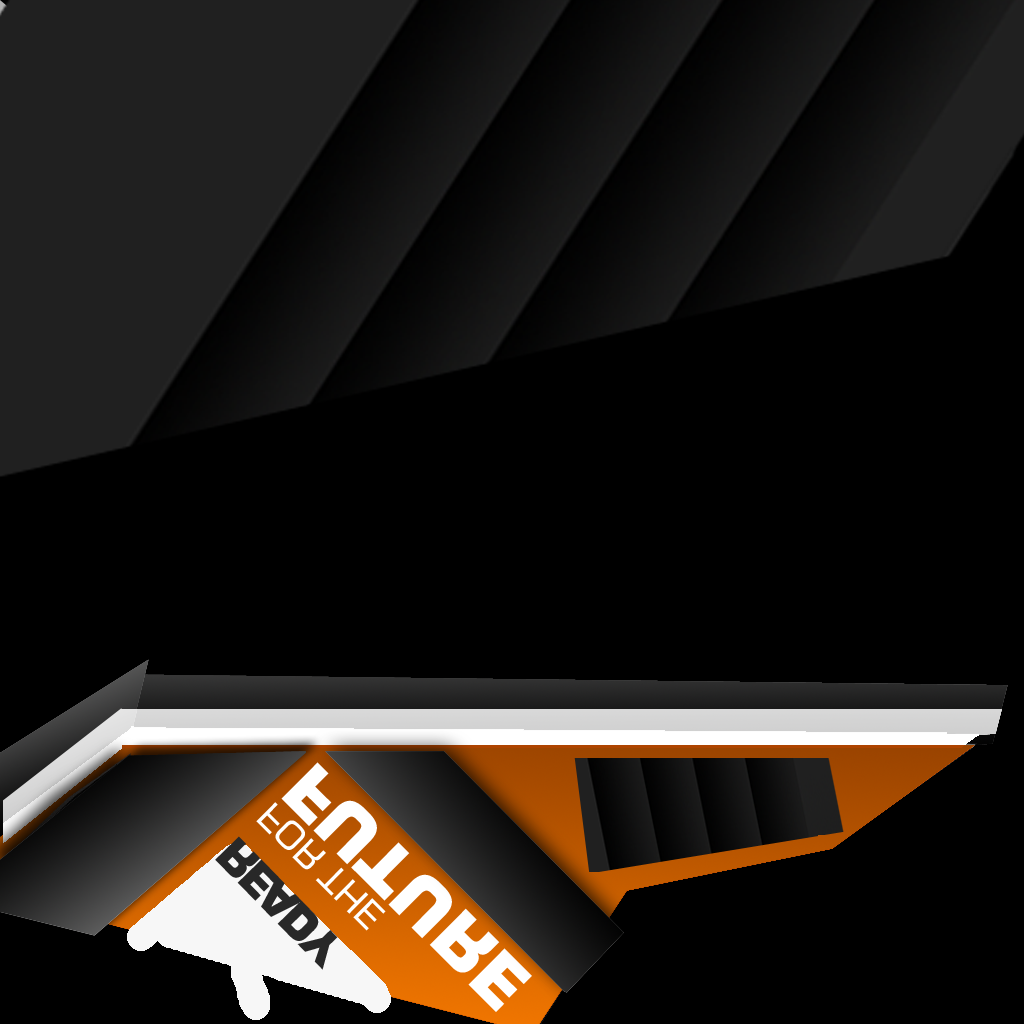
<style>
.page{position:relative;width:1024px;height:1024px;background:#000000}
.page>*{position:absolute;margin:0}
.t1{font:37px/58px "Moire";color:#ffffff;scale:0.96 1}
.t2{font:70px/58px "Moire-ExtraBold";color:#ffffff;scale:0.96 1}
.t3{font:45.5px "Moire-ExtraBold";letter-spacing:-0.1em;color:#282828;scale:0.96 1}
</style>
<div class="page">
<p class="t1" style="left:256px;top:762px;width:276px;height:250px;rotate:45deg">FOR THE<br><span class="t2">FUTURE</span></p>
<p class="t3" style="left:215px;top:836px;width:123px;height:134px;rotate:46deg">READY</p>
</div>
